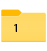
<style>
.page{position:relative;width:47px;height:51px;background:#ffffff}
.page>*{position:absolute;margin:0}
.t1{font:12px "MyriadPro-Regular";color:#000000}
</style>
<div class="page">
<p class="t1" style="left:14px;top:24px;width:3px;height:8px">1</p>
</div>
